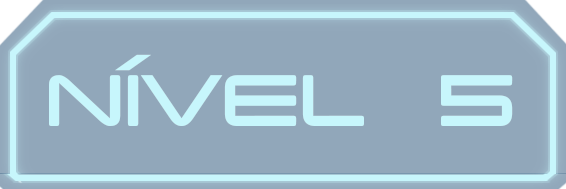
<style>
.page{position:relative;width:566px;height:189px;background:#91a7ba}
.page>*{position:absolute;margin:0}
.t1{font:104.2px "PCapTerminal";letter-spacing:0.025em;color:#c7f6fc}
</style>
<div class="page">
<p class="t1" style="left:49px;top:54px;width:464px;height:72px">NÍVEL 5</p>
</div>
